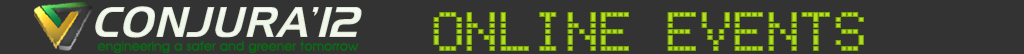
<style>
.page{position:relative;width:1024px;height:54px;background:#333333}
.page>*{position:absolute;margin:0}
.t1{font:41.9px "NewtownItalic";letter-spacing:0.02em;color:#ffffff}
.t2{font:53px "ElectronicHighwaySign";letter-spacing:0.02em}
</style>
<div class="page">
<p class="t1" style="left:95px;top:6px;width:267px;height:32px">CONJURA’12</p>
<p class="t2" style="left:433px;top:12px;width:431px;height:39px">Online Events</p>
</div>
